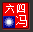
<style>
.page{position:relative;width:33px;height:32px;background:#f20000}
.page>*{position:absolute;margin:0}
.t1{font:10.4px "SimSun";color:#ffffff}
.t2{font:11.7px "SimSun";color:#ffffff}
</style>
<div class="page">
<p class="t1" style="left:5px;top:4px;width:20px;height:9px">六四</p>
<p class="t2" style="left:16px;top:15px;width:11px;height:12px">冯</p>
</div>
